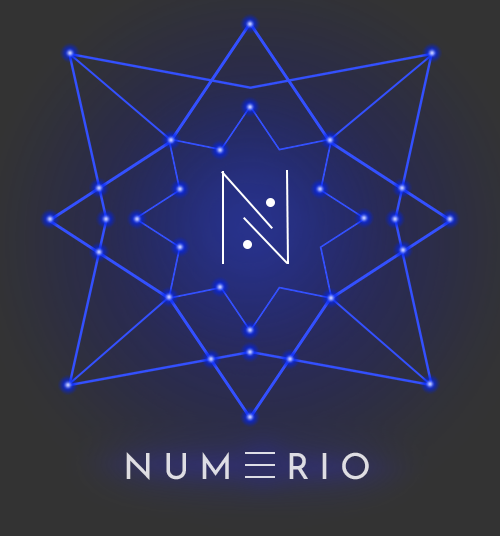
<style>
.page{position:relative;width:500px;height:536px}
.page>*{position:absolute;margin:0}
.t1{font:36px "JosefinSans-Regular";letter-spacing:0.28em;color:#dedde4}
</style>
<div class="page">
<p class="t1" style="left:126px;top:452px;width:243px;height:28px">NUM  RIO</p>
</div>
